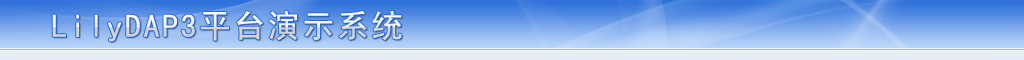
<style>
.page{position:relative;width:1024px;height:60px}
.page>*{position:absolute;margin:0}
.t1{font:32px "SimHei";letter-spacing:0.05em;font-weight:bold}
</style>
<div class="page">
<p class="t1" style="left:52px;top:10px;width:350px;height:32px">LilyDAP3平台演示系统</p>
</div>
